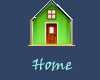
<style>
.page{position:relative;width:100px;height:80px;background:#324464}
.page>*{position:absolute;margin:0}
.t1{font:16px "VinerHandITC";color:#95feee}
</style>
<div class="page">
<p class="t1" style="left:32px;top:58px;width:41px;height:13px">Home</p>
</div>
